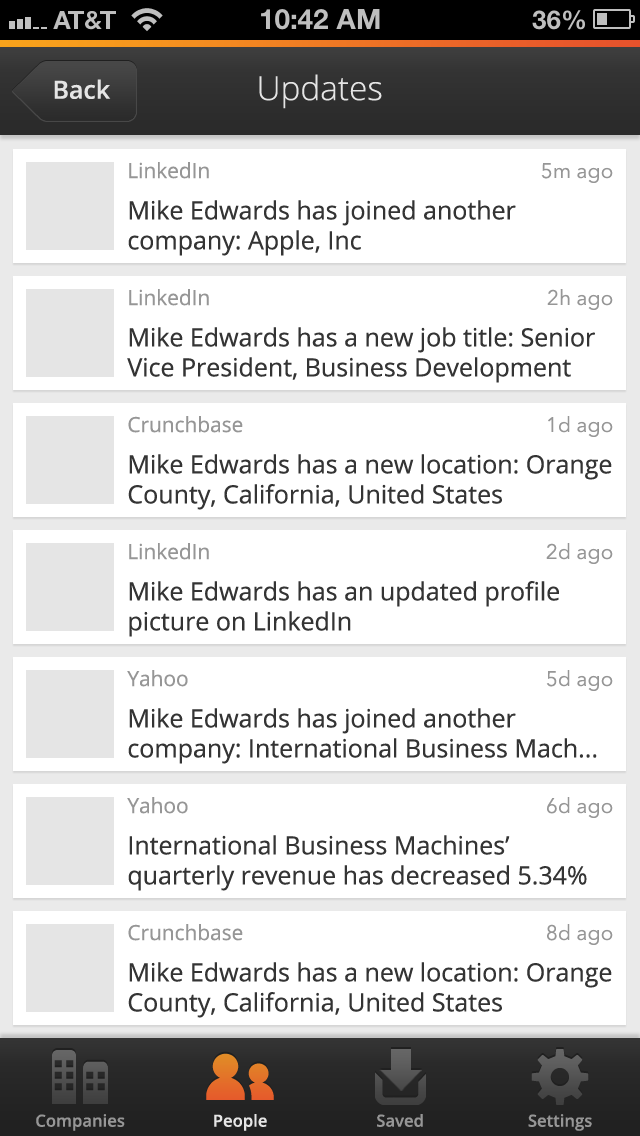
<style>
.page{position:relative;width:640px;height:1136px;background:#ffffff}
.page>*{position:absolute;margin:0}
.t1{font:33.3px "OpenSans-Light";color:#e5e5e5}
.t2{font:25px "OpenSans-Semibold";color:#e5e5e5}
.t3{font:25px "OpenSans";color:#343434}
.t4{font:20.8px "OpenSans";color:#969696}
.t5{font:20.8px "AvenirNext-Regular";color:#969696}
.t6{font:16.7px "OpenSans-Semibold";color:#969696}
.t7{font:16.7px "OpenSans-Semibold";color:#e5e5e5}
</style>
<div class="page">
<p class="t1" style="left:259px;top:74px;width:123px;height:35px">Updates</p>
<p class="t2" style="left:54px;top:79px;width:57px;height:20px">Back</p>
<p class="t3" style="left:128px;top:162px;width:388px;height:94px"><span class="t4">LinkedIn<br></span>Mike Edwards has joined another company: Apple, Inc</p>
<p class="t5" style="left:541px;top:163px;width:72px;height:20px">5m ago</p>
<p class="t3" style="left:127px;top:289px;width:468px;height:94px"><span class="t4">LinkedIn<br></span>Mike Edwards has a new job title: Senior Vice President, Business Development</p>
<p class="t5" style="left:547px;top:289px;width:66px;height:21px">2h ago</p>
<p class="t3" style="left:128px;top:416px;width:484px;height:94px"><span class="t4">Crunchbase<br></span>Mike Edwards has a new location: Orange County, California, United States</p>
<p class="t5" style="left:548px;top:416px;width:65px;height:21px">1d ago</p>
<p class="t3" style="left:129px;top:543px;width:430px;height:94px"><span class="t4">LinkedIn<br></span>Mike Edwards has an updated profile picture on LinkedIn</p>
<p class="t5" style="left:546px;top:543px;width:67px;height:21px">2d ago</p>
<p class="t3" style="left:127px;top:670px;width:470px;height:94px"><span class="t4">Yahoo<br></span>Mike Edwards has joined another company: International Business Mach...</p>
<p class="t5" style="left:546px;top:670px;width:67px;height:21px">5d ago</p>
<p class="t3" style="left:127px;top:797px;width:460px;height:94px"><span class="t4">Yahoo<br></span>International Business Machines’ quarterly revenue has decreased 5.34%</p>
<p class="t5" style="left:547px;top:797px;width:66px;height:21px">6d ago</p>
<p class="t3" style="left:128px;top:924px;width:484px;height:94px"><span class="t4">Crunchbase<br></span>Mike Edwards has a new location: Orange County, California, United States</p>
<p class="t5" style="left:547px;top:924px;width:66px;height:21px">8d ago</p>
<p class="t6" style="left:36px;top:1114px;width:89px;height:17px">Companies</p>
<p class="t7" style="left:214px;top:1114px;width:53px;height:17px">People</p>
<p class="t6" style="left:377px;top:1114px;width:46px;height:13px">Saved</p>
<p class="t6" style="left:528px;top:1114px;width:64px;height:17px">Settings</p>
</div>
